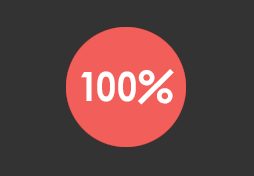
<style>
.page{position:relative;width:254px;height:176px;background:#333333}
.page>*{position:absolute;margin:0}
.t1{font:37.5px "hzgb";letter-spacing:0.005em;color:#ffffff}
</style>
<div class="page">
<p class="t1" style="left:81px;top:69px;width:93px;height:36px">100%</p>
</div>
